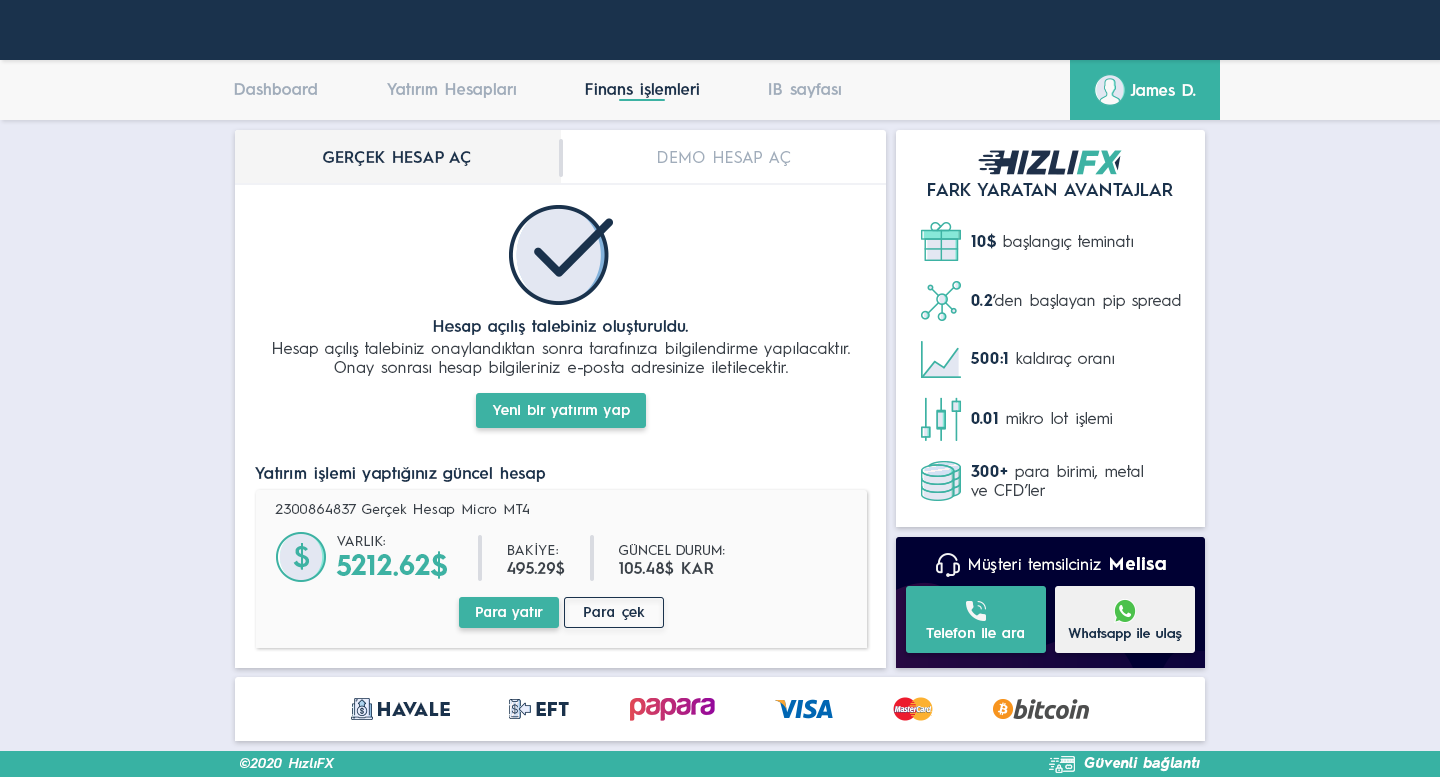
<style>
.page{position:relative;width:1440px;height:777px;background:#ffffff}
.page>*{position:absolute;margin:0}
.t1{font:16px "HurmeGeometricSans3-SemiBold";color:#a1adbb}
.t2{font:16px "HurmeGeometricSans3-SemiBold";color:#1a324c}
.t3{font:16px "HurmeGeometricSans3-SemiBold";color:#fefefe}
.t4{font:16px "HurmeGeometricSans1-SemiBold";letter-spacing:0.01em;color:#1a324c}
.t5{font:16px "HurmeGeometricSans1-Regular";letter-spacing:0.01em;color:#a1adbb}
.t6{font:18px "HurmeGeometricSans1-SemiBold";color:#1a324c}
.t7{font:16px "HurmeGeometricSans1-Regular";color:#3a4149}
.t8{font:16px "HurmeGeometricSans1-Bold";color:#1a324c}
.t9{font:16px "HurmeGeometricSans3-SemiBold";letter-spacing:0.01em;color:#1a324c}
.t10{font:16px "HurmeGeometricSans1-Regular";letter-spacing:0.01em;color:#3a4149}
.t11{font:14px "HurmeGeometricSans3-SemiBold";letter-spacing:0.025em;color:#ffffff}
.t12{font:14px "HurmeGeometricSans1-Regular";letter-spacing:0.025em;color:#3a4149}
.t13{font:29.2px "HurmeGeometricSans2-SemiBold";letter-spacing:0.01em;color:#3db2a3}
.t14{font:14px "HurmeGeometricSans1-Regular";letter-spacing:0.01em;color:#3a4149}
.t15{font:16px "HurmeGeometricSans1-SemiBold";letter-spacing:0.01em;color:#3a4149}
.t16{font:13px "HurmeGeometricSans1-Regular";letter-spacing:0.01em;color:#3a4149}
.t17{font:28px "HurmeGeometricSans1-Bold";letter-spacing:0.01em;color:#3db2a3}
.t18{font:16px "HurmeGeometricSans1-Regular";letter-spacing:0.025em;color:#ffffff}
.t19{font:18px "HurmeGeometricSans1-Bold";letter-spacing:0.05em;color:#ffffff}
.t20{font:14px "HurmeGeometricSans3-SemiBold";letter-spacing:0.01em;color:#ffffff}
.t21{font:14px "HurmeGeometricSans3-SemiBold";letter-spacing:0.025em;color:#1a324c}
.t22{font:13.5px "HurmeGeometricSans3-SemiBold";letter-spacing:0.01em;color:#1a324c}
.t23{font:18px "HurmeGeometricSans1-Black";letter-spacing:0.025em;color:#1a324c}
.t24{font:14px "HurmeGeometricSans2-SemiBoldObl";letter-spacing:0.025em;color:#ffffff}
.t25{font:14px "HurmeGeometricSans2-BoldObl";letter-spacing:0.025em;color:#ffffff}
</style>
<div class="page">
<p class="t1" style="left:234px;top:83px;width:83px;height:12px">Dashboard</p>
<p class="t1" style="left:387px;top:83px;width:129px;height:15px">Yatırım Hesapları</p>
<p class="t2" style="left:585px;top:83px;width:114px;height:15px">Finans işlemleri</p>
<p class="t1" style="left:769px;top:83px;width:72px;height:15px">IB sayfası</p>
<p class="t3" style="left:1130px;top:84px;width:66px;height:12px">James D.</p>
<p class="t4" style="left:323px;top:151px;width:148px;height:15px">GERÇEK HESAP AÇ</p>
<p class="t5" style="left:658px;top:151px;width:133px;height:15px">DEMO HESAP AÇ</p>
<p class="t6" style="left:928px;top:183px;width:245px;height:13px">FARK YARATAN AVANTAJLAR</p>
<p class="t7" style="left:971px;top:233px;width:162px;height:17px"><span class="t8">10$</span> başlangıç teminatı</p>
<p class="t7" style="left:971px;top:294px;width:210px;height:15px"><span class="t8">0.2</span>‘den başlayan pip spread</p>
<p class="t9" style="left:433px;top:320px;width:255px;height:15px">Hesap açılış talebiniz oluşturuldu.</p>
<p class="t10" style="left:273px;top:342px;width:577px;height:34px;text-align:center">Hesap açılış talebiniz onaylandıktan sonra tarafınıza bilgilendirme yapılacaktır.<br>Onay sonrası hesap bilgileriniz e-posta adresinize iletilecektir.</p>
<p class="t7" style="left:970px;top:352px;width:144px;height:15px"><span class="t8">500:1</span> kaldıraç oranı</p>
<p class="t11" style="left:492px;top:405px;width:138px;height:13px">Yeni bir yatırım yap</p>
<p class="t7" style="left:971px;top:412px;width:141px;height:15px"><span class="t8">0.01</span> mikro lot işlemi</p>
<p class="t9" style="left:255px;top:467px;width:291px;height:15px">Yatırım işlemi yaptığınız güncel hesap</p>
<p class="t7" style="left:971px;top:465px;width:172px;height:32px"><span class="t8">300+</span> para birimi, metal<br>ve CFD’ler</p>
<p class="t12" style="left:275px;top:504px;width:254px;height:13px">2300864837 Gerçek Hesap Micro MT4</p>
<p class="t13" style="left:293px;top:543px;width:17px;height:27px">$</p>
<p class="t14" style="left:337px;top:536px;width:48px;height:10px">VARLIK:</p>
<p class="t14" style="left:507px;top:543px;width:58px;height:33px">BAKİYE:<br><span class="t15">495.29$</span></p>
<p class="t16" style="left:619px;top:544px;width:106px;height:32px">GÜNCEL DURUM:<br><span class="t15">105.48$ KAR</span></p>
<p class="t17" style="left:336px;top:551px;width:111px;height:28px">5212.62$</p>
<p class="t18" style="left:969px;top:557px;width:197px;height:16px">Müşteri temsilciniz <span class="t19">Melisa</span></p>
<p class="t20" style="left:476px;top:607px;width:67px;height:13px">Para yatır</p>
<p class="t21" style="left:584px;top:607px;width:61px;height:13px">Para çek</p>
<p class="t20" style="left:926px;top:628px;width:98px;height:10px">Telefon ile ara</p>
<p class="t22" style="left:1068px;top:628px;width:114px;height:13px">Whatsapp ile ulaş</p>
<p class="t23" style="left:378px;top:702px;width:72px;height:14px">HAVALE</p>
<p class="t23" style="left:536px;top:702px;width:33px;height:14px">EFT</p>
<p class="t24" style="left:240px;top:758px;width:95px;height:10px">©2020 HızlıFX</p>
<p class="t25" style="left:1084px;top:757px;width:116px;height:15px">Güvenli bağlantı</p>
</div>
